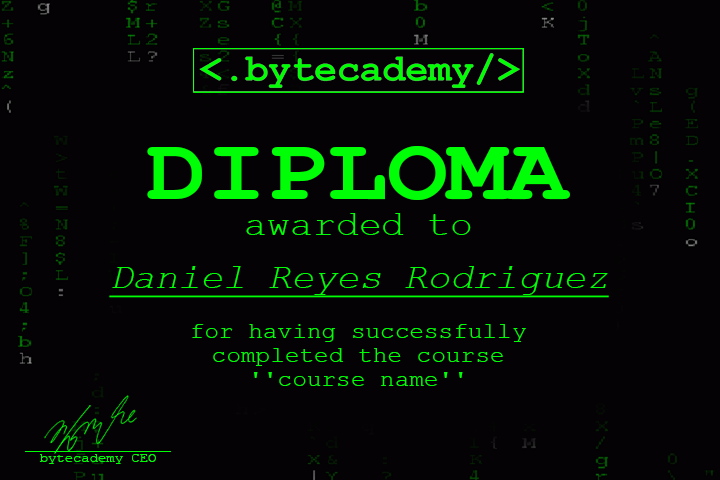
<style>
.page{position:relative;width:720px;height:480px;background:#040204}
.page>*{position:absolute;margin:0}
.t1{font:91.4px "CourierNewPS-BoldMT";color:#00ff06;scale:1.1 1}
.t2{font:34.6px "CourierNewPSMT";color:#00ff06;scale:1.1 1}
.t3{font:34.9px "CourierNewPS-ItalicMT";color:#00ff06;text-decoration:underline;scale:1.08 1}
.t4{font:22.4px/23.9px "CourierNewPSMT";color:#00ff06;scale:1.09 1}
.t5{font:12.7px "CourierNewPSMT";color:#00ff06;scale:1.09 1}
</style>
<div class="page">
<p class="t1" style="left:147px;top:146px;width:423px;height:54px">DIPLOMA</p>
<p class="t2" style="left:246px;top:213px;width:225px;height:22px">awarded to</p>
<p class="t3" style="left:109px;top:266px;width:500px;height:32px">Daniel Reyes Rodriguez</p>
<p class="t4" style="left:192px;top:324px;width:334px;height:62px;text-align:center">for having successfully completed the course ''course name''</p>
<p class="t5" style="left:40px;top:454px;width:116px;height:10px">bytecademy CEO</p>
</div>
